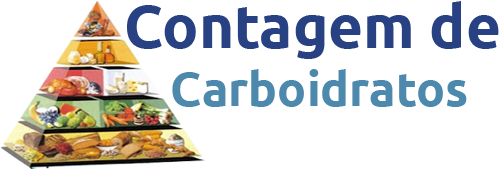
<style>
.page{position:relative;width:500px;height:169px;background:#ffffff}
.page>*{position:absolute;margin:0}
.t1{font:48px "Ubuntu-Bold";color:#4d89ad}
.t2{font:60px "Ubuntu-Bold";color:#284183}
</style>
<div class="page">
<p class="t1" style="left:127px;top:1px;width:372px;height:106px"><span class="t2">Contagem de<br></span>    Carboidratos</p>
</div>
